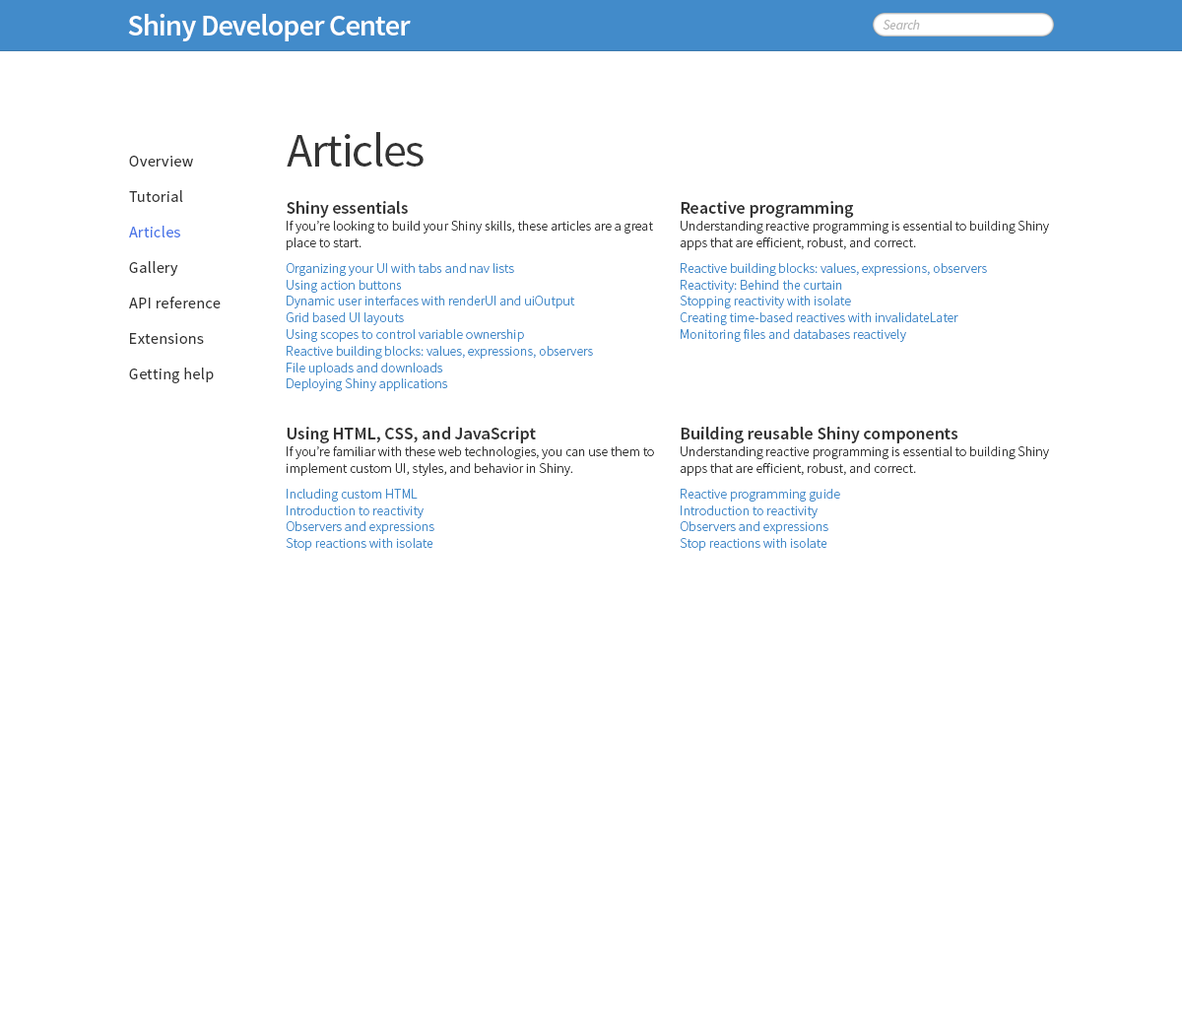
<style>
.page{position:relative;width:1182px;height:1009px;background:#ffffff}
.page>*{position:absolute;margin:0}
.t1{font:29.6px "SourceSansPro-Semibold";letter-spacing:-0.025em;color:#ffffff}
.t2{font:13.8px "SourceSansPro-It";letter-spacing:-0.025em;color:#b4b4b4}
.t3{font:47.3px "SourceSansPro-Regular";letter-spacing:-0.025em;color:#333333}
.t4{font:15.8px/35.5px "SourceSansPro-Regular";letter-spacing:0.025em;color:#333333}
.t5{font:15.8px/35.5px "SourceSansPro-Regular";letter-spacing:0.025em;color:#4a76e8}
.t6{font:13.8px "SourceSansPro-Light";color:#428bca}
.t7{font:17.7px "SourceSansPro-Semibold";color:#333333}
.t8{font:13.8px "SourceSansPro-Light";color:#333333}
</style>
<div class="page">
<p class="t1" style="left:128px;top:14px;width:283px;height:27px">Shiny Developer Center</p>
<p class="t2" style="left:883px;top:20px;width:37px;height:10px">Search</p>
<p class="t3" style="left:287px;top:132px;width:137px;height:34px">Articles</p>
<p class="t4" style="left:129px;top:156px;width:92px;height:227px">Overview<br>Tutorial<br><span class="t5">Articles<br></span>Gallery<br>API reference<br>Extensions<br>Getting help</p>
<p class="t6" style="left:286px;top:201px;width:367px;height:190px"><span class="t7">Shiny essentials<br></span><span class="t8">If you’re looking to build your Shiny skills, these articles are a great place to start.<br></span>Organizing your UI with tabs and nav lists<br>Using action buttons<br>Dynamic user interfaces with renderUI and uiOutput<br>Grid based UI layouts<br>Using scopes to control variable ownership<br>Reactive building blocks: values, expressions, observers<br>File uploads and downloads<br>Deploying Shiny applications</p>
<p class="t6" style="left:680px;top:201px;width:369px;height:141px"><span class="t7">Reactive programming<br></span><span class="t8">Understanding reactive programming is essential to building Shiny apps that are efficient, robust, and correct.<br></span>Reactive building blocks: values, expressions, observers<br>Reactivity: Behind the curtain<br>Stopping reactivity with isolate<br>Creating time-based reactives with invalidateLater<br>Monitoring files and databases reactively</p>
<p class="t8" style="left:286px;top:427px;width:368px;height:124px"><span class="t7">Using HTML, CSS, and JavaScript<br></span>If you’re familiar with these web technologies, you can use them to implement custom UI, styles, and behavior in Shiny.<br><span class="t6">Including custom HTML<br>Introduction to reactivity<br>Observers and expressions<br>Stop reactions with isolate</span></p>
<p class="t8" style="left:680px;top:427px;width:369px;height:124px"><span class="t7">Building reusable Shiny components<br></span>Understanding reactive programming is essential to building Shiny apps that are efficient, robust, and correct.<br><span class="t6">Reactive programming guide<br>Introduction to reactivity<br>Observers and expressions<br>Stop reactions with isolate</span></p>
</div>
